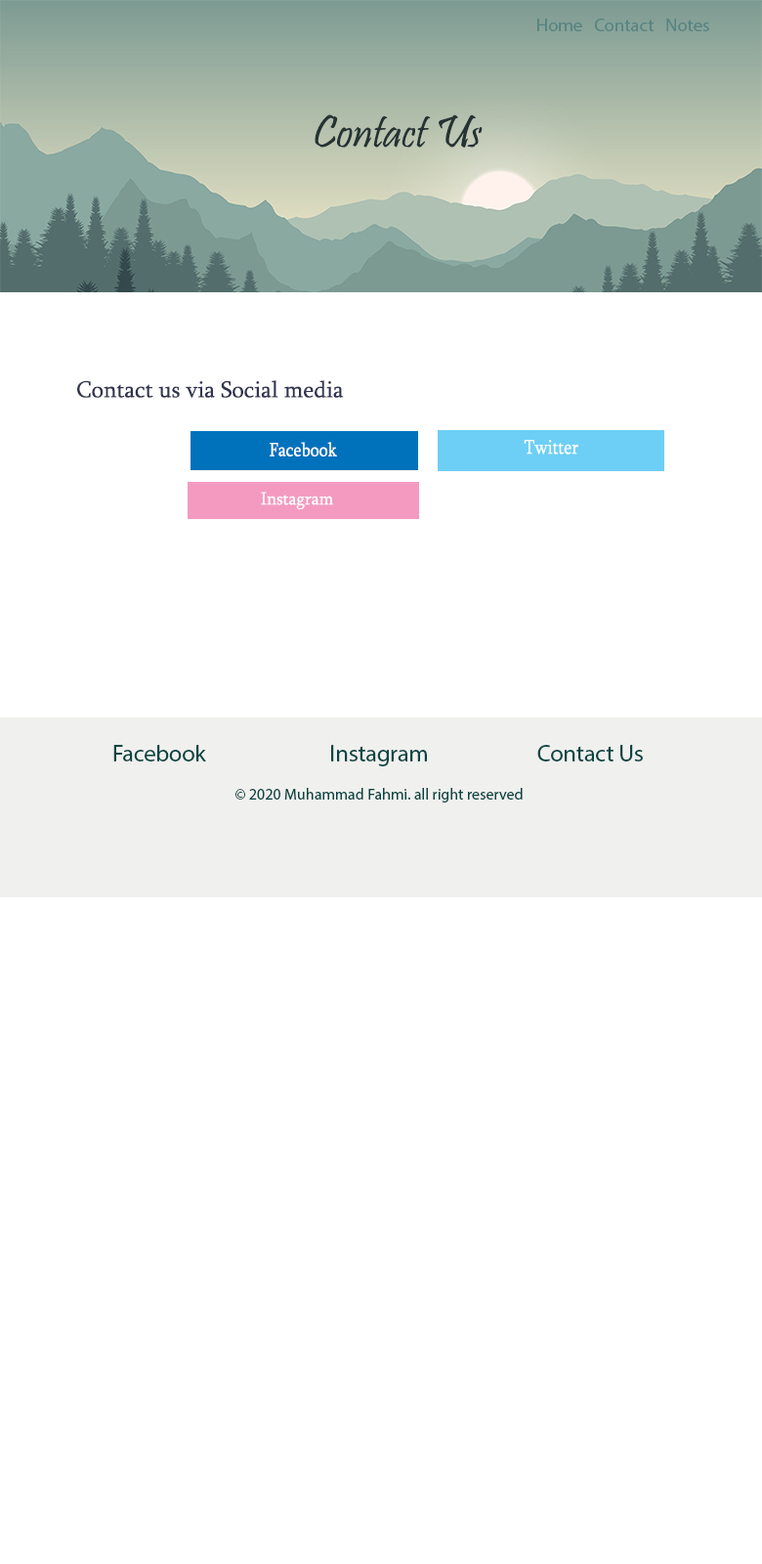
<style>
.page{position:relative;width:762px;height:1564px;background:#ffffff}
.page>*{position:absolute;margin:0}
.t1{font:18.2px "MyriadPro-Regular";color:#568381}
.t2{font:46.9px "Pristina-Regular";color:#253334}
.t3{font:23.5px "Sylfaen";color:#31344f}
.t4{font:19.4px "Sylfaen";color:#ffffff;scale:0.89 1}
.t5{font:20.3px "Sylfaen";color:#ffffff;scale:0.84 1}
.t6{font:18.2px "Sylfaen";color:#ffffff;scale:0.96 1}
.t7{font:11.7px "MyriadPro-Regular";color:#064542}
.t8{font:23.5px "MyriadPro-Regular";color:#064542}
</style>
<div class="page">
<p class="t1" style="left:538px;top:19px;width:172px;height:12px">Home   Contact   Notes</p>
<p class="t2" style="left:315px;top:114px;width:168px;height:34px">Contact Us</p>
<p class="t3" style="left:77px;top:380px;width:267px;height:18px">Contact us via Social media</p>
<p class="t4" style="left:270px;top:442px;width:67px;height:14px">Facebook</p>
<p class="t5" style="left:524px;top:440px;width:56px;height:15px">Twitter</p>
<p class="t6" style="left:261px;top:492px;width:72px;height:17px">Instagram</p>
<p class="t7" style="left:113px;top:745px;width:530px;height:58px;text-align:center"><span class="t8">Facebook       Instagram      Contact Us<br></span><br>© 2020 Muhammad Fahmi. all right reserved</p>
</div>
